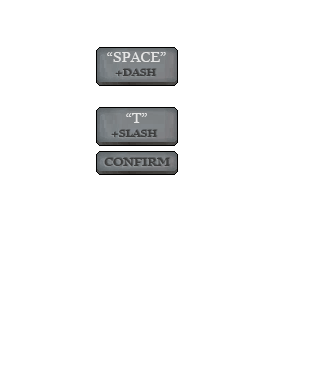
<style>
.page{position:relative;width:328px;height:384px;background:#ffffff}
.page>*{position:absolute;margin:0}
.t1{font:12.6px "Georgia";color:#e6e6e6;scale:1.19 1}
.t2{font:10px "Georgia";color:#3d3d3d;scale:1.19 1}
.t3{font:10.8px "Georgia";color:#3d3d3d;scale:1.27 1}
</style>
<div class="page">
<p class="t1" style="left:107px;top:52px;width:59px;height:10px">“SPACE”</p>
<p class="t2" style="left:115px;top:69px;width:41px;height:7px">+DASH</p>
<p class="t1" style="left:126px;top:113px;width:21px;height:10px">“T”</p>
<p class="t2" style="left:111px;top:130px;width:46px;height:7px">+SLASH</p>
<p class="t3" style="left:104px;top:158px;width:66px;height:8px">CONFIRM</p>
</div>
